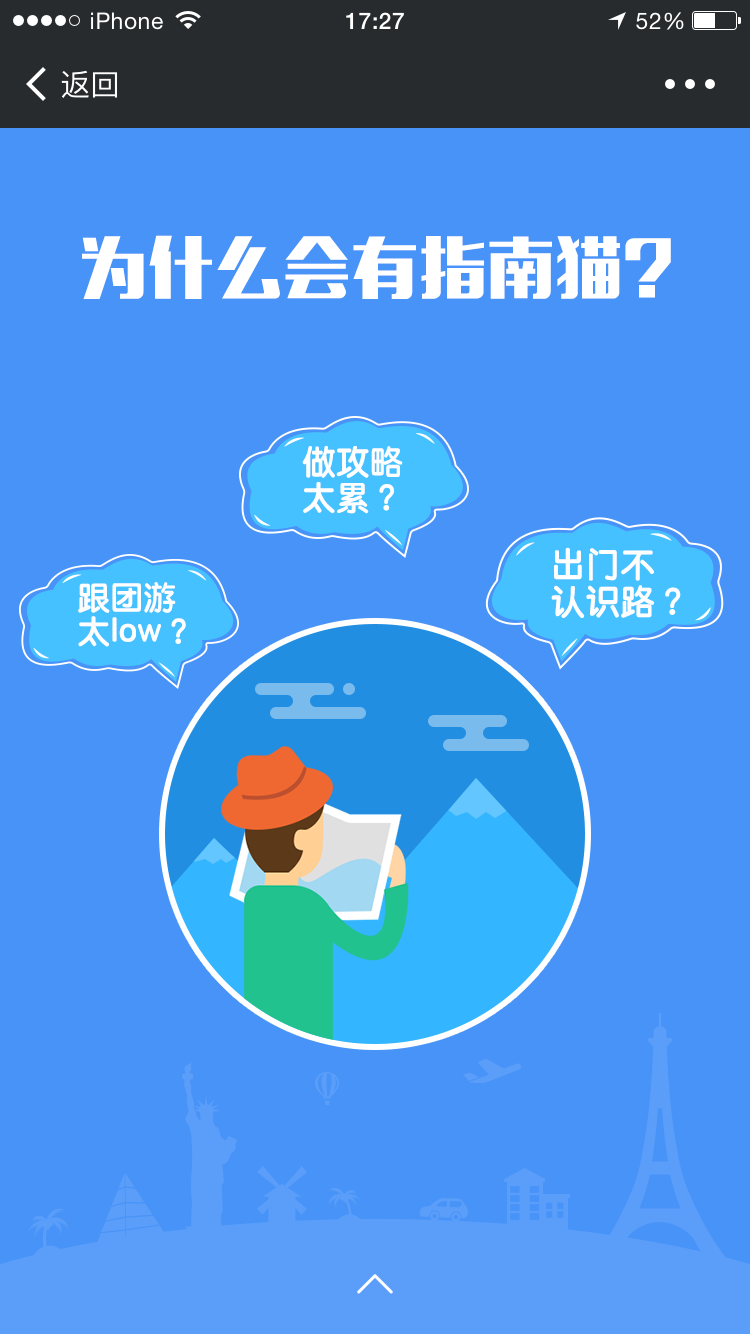
<style>
.page{position:relative;width:750px;height:1334px;background:#4893f8}
.page>*{position:absolute;margin:0}
.t1{font:66px "MFLiHei_Noncommercial-Regular";letter-spacing:0.03em;color:#ffffff}
.t2{font:33px/35.9px "STYuanti-TC-Bold";letter-spacing:0.03em;color:#ffffff}
.t3{font:34px/37.2px "STYuanti-TC-Bold";letter-spacing:0.03em;color:#ffffff}
.t4{font:32px/34.2px "STYuanti-TC-Bold";letter-spacing:0.03em;color:#ffffff}
</style>
<div class="page">
<p class="t1" style="left:82px;top:235px;width:589px;height:64px">为什么会有指南猫?</p>
<p class="t2" style="left:302px;top:445px;width:101px;height:69px">做攻略<br>太累？</p>
<p class="t3" style="left:551px;top:547px;width:130px;height:71px">出门不<br>认识路？</p>
<p class="t4" style="left:78px;top:582px;width:108px;height:65px">跟团游<br>太low？</p>
</div>
